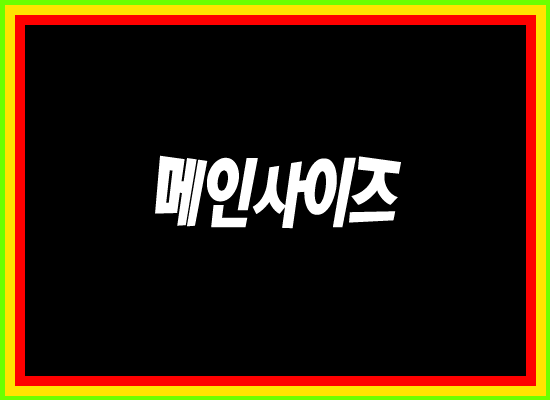
<style>
.page{position:relative;width:550px;height:400px;background:#000000}
.page>*{position:absolute;margin:0}
.t1{font:72px "RixComingsoonB";color:#ffffff;font-style:italic;scale:0.8 1}
</style>
<div class="page">
<p class="t1" style="left:155px;top:155px;width:246px;height:74px">메인사이즈</p>
</div>
